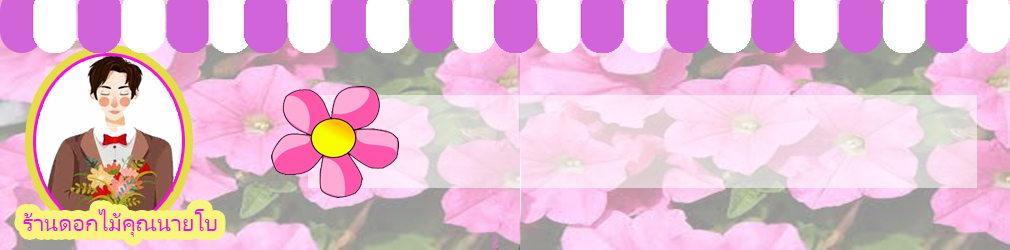
<style>
.page{position:relative;width:1010px;height:250px}
.page>*{position:absolute;margin:0}
.t1{font:24px "LeelawadeeUI";color:#f60de8}
</style>
<div class="page">
<p class="t1" style="left:23px;top:209px;width:194px;height:28px">ร้านดอกไม้คุณนายโบ</p>
</div>
